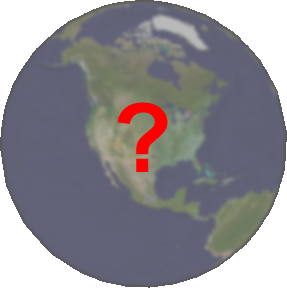
<style>
.page{position:relative;width:287px;height:288px;background:#ffffff}
.page>*{position:absolute;margin:0}
.t1{font:96px "Arial-BoldMT";color:#ff0000}
</style>
<div class="page">
<p class="t1" style="left:117px;top:102px;width:51px;height:70px">?</p>
</div>
